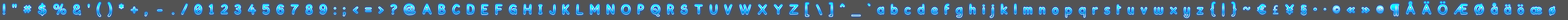
<style>
.page{position:relative;width:1568px;height:20px;background:#535353}
.page>*{position:absolute;margin:0}
.t1{font:12.7px "Kronika";letter-spacing:0.6em;scale:0.88 1}
.t2{font:12.7px "MyriadPro-Regular";letter-spacing:0.6em;scale:0.88 1}
</style>
<div class="page">
<p class="t1" style="left:3px;top:2px;width:1552px;height:16px">!"#$%&amp;'()*+, - ./0123456789:;&lt;=&gt;?@ABCDEFGHIJKLMNOPQRSTUVWXYZ[\]^_`abcdefghijklmnopqrstuvwxyz{|}~€<span class="t2">£</span>¥§•·©«»®¶ÅÄÖÆØåäöæø</p>
</div>
